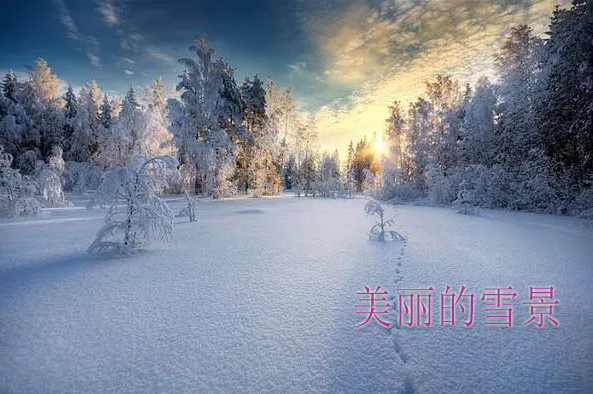
<style>
.page{position:relative;width:593px;height:394px}
.page>*{position:absolute;margin:0}
.t1{font:46.2px "SimSun";color:#a5379c;scale:0.91 1}
</style>
<div class="page">
<p class="t1" style="left:354px;top:285px;width:206px;height:43px">美丽的雪景</p>
</div>
